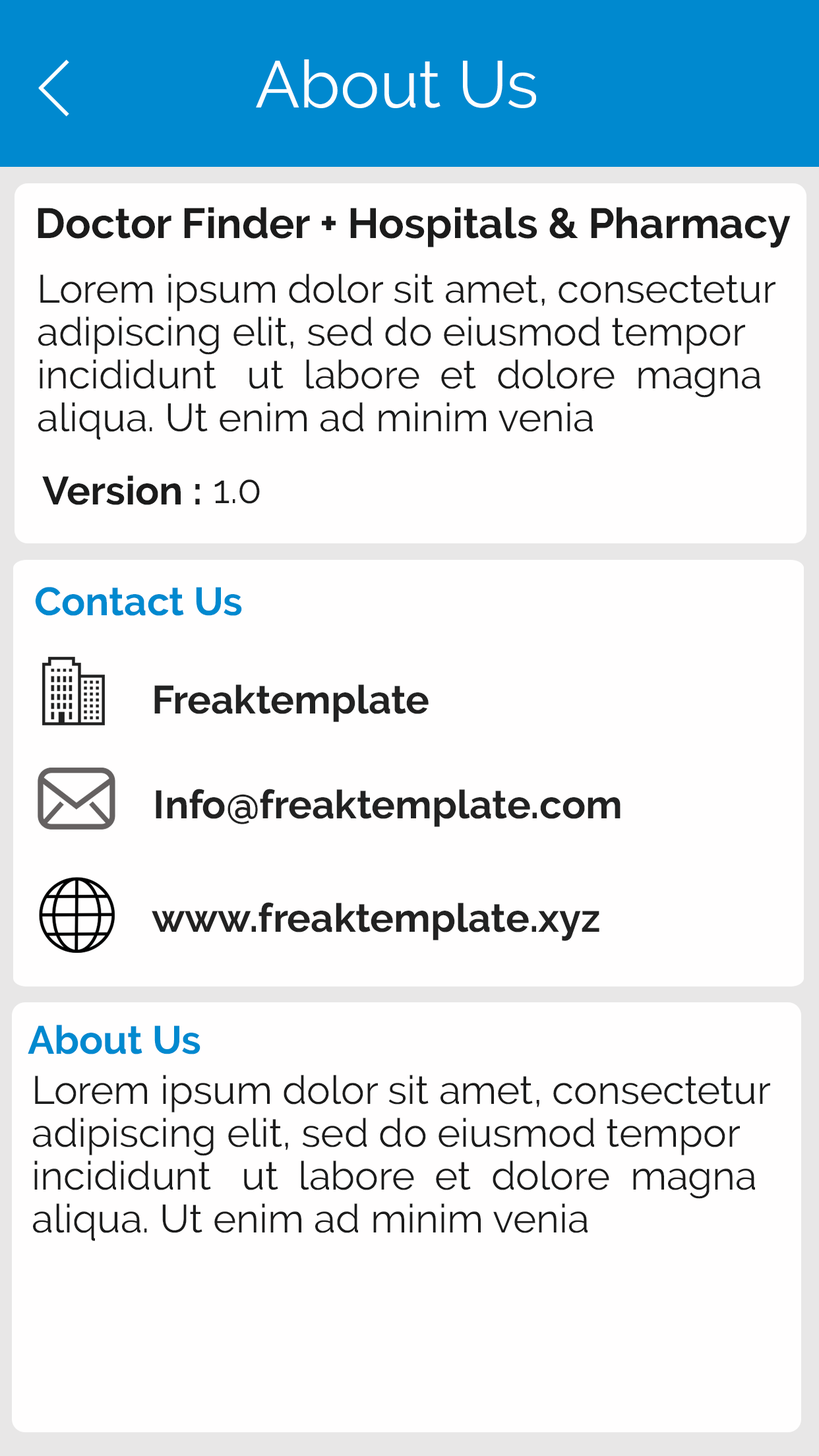
<style>
.page{position:relative;width:819px;height:1456px;background:#fffefe}
.page>*{position:absolute;margin:0}
.t1{font:65.9px "Raleway-Regular";color:#fdfeff}
.t2{font:42.2px "Raleway-Bold";color:#1b1b1b}
.t3{font:39.6px/42.9px "Raleway-Regular";color:#1b1b1b}
.t4{font:39.6px "Raleway-Bold";color:#1b1b1b}
.t5{font:39.6px "Raleway-Regular";color:#1b1b1b}
.t6{font:39.6px "Raleway-Bold";color:#0089cf}
.t7{font:39.6px "Raleway-Bold";color:#222222}
</style>
<div class="page">
<p class="t1" style="left:256px;top:59px;width:280px;height:49px">About Us</p>
<p class="t2" style="left:38px;top:207px;width:753px;height:41px">Doctor Finder + Hospitals &amp; Pharmacy</p>
<p class="t3" style="left:38px;top:274px;width:737px;height:166px">Lorem ipsum dolor sit amet, consectetur <br>adipiscing elit, sed do eiusmod tempor <br>incididunt   ut  labore  et  dolore  magna <br>aliqua. Ut enim ad minim venia</p>
<p class="t4" style="left:42px;top:475px;width:158px;height:30px">Version :</p>
<p class="t5" style="left:214px;top:479px;width:46px;height:25px">1.0</p>
<p class="t6" style="left:35px;top:587px;width:207px;height:29px">Contact Us</p>
<p class="t7" style="left:154px;top:684px;width:275px;height:38px">Freaktemplate</p>
<p class="t7" style="left:156px;top:789px;width:465px;height:38px">Info@freaktemplate.com</p>
<p class="t7" style="left:152px;top:902px;width:447px;height:39px">www.freaktemplate.xyz</p>
<p class="t6" style="left:28px;top:1025px;width:172px;height:29px">About Us</p>
<p class="t3" style="left:33px;top:1075px;width:737px;height:166px">Lorem ipsum dolor sit amet, consectetur <br>adipiscing elit, sed do eiusmod tempor <br>incididunt   ut  labore  et  dolore  magna <br>aliqua. Ut enim ad minim venia</p>
</div>
